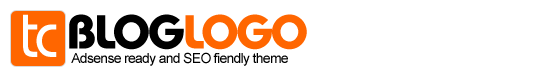
<style>
.page{position:relative;width:560px;height:75px;background:#ffffff}
.page>*{position:absolute;margin:0}
.t1{font:72px "BauhausItcTEE-Medi";letter-spacing:-0.05em;color:#ffffff;scale:0.89 1}
.t2{font:50px "BauhausItcTEE-Bold";letter-spacing:-0.05em;color:#000000}
.t3{font:12px "Magneto-Bold";letter-spacing:-0.05em;color:#333333}
.t4{font:50px "BauhausItcTEE-Bold";letter-spacing:-0.05em;color:#ff6600}
.t5{font:14px "ArialMT";letter-spacing:-0.05em;color:#000000}
</style>
<div class="page">
<p class="t1" style="left:23px;top:14px;width:34px;height:43px">tc</p>
<p class="t2" style="left:69px;top:14px;width:238px;height:36px"><span class="t3"> </span>BLOG<span class="t4">LOGO</span></p>
<p class="t5" style="left:71px;top:52px;width:217px;height:14px">Adsense ready and SEO fiendly theme</p>
</div>
